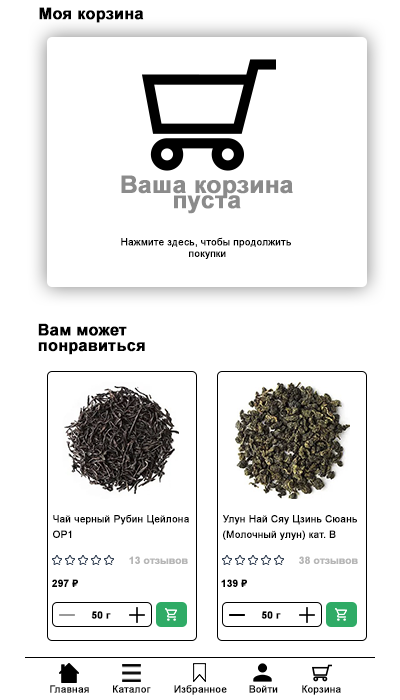
<style>
.page{position:relative;width:400px;height:700px;background:#ffffff}
.page>*{position:absolute;margin:0}
.t1{font:16px "Arial-BoldMT";color:#000000;font-weight:bold}
.t2{font:24px/3.8px "Arial-BoldMT";color:#8b8b8b;font-weight:bold}
.t3{font:10px/3.8px "ArialMT";color:#000000;font-weight:bold}
.t4{font:16px/3.8px "Arial-BoldMT";color:#000000;font-weight:bold}
.t5{font:10px "Arial-BoldMT";color:#b6b6b6;font-weight:bold}
.t6{font:10px "Arial-BoldMT";color:#000000;font-weight:bold}
.t7{font:10px "ArialMT";color:#000000;font-weight:bold}
</style>
<div class="page">
<p class="t1" style="left:39px;top:7px;width:105px;height:16px">Моя корзина</p>
<p class="t2" style="left:121px;top:175px;width:172px;height:39px;text-align:center">Ваша корзина<br><br><br><br>пуста</p>
<p class="t3" style="left:121px;top:237px;width:170px;height:22px;text-align:center">Нажмите здесь, чтобы продолжить <br><br><br>покупки</p>
<p class="t4" style="left:38px;top:323px;width:107px;height:32px">Вам может<br><br><br><br>понравиться</p>
<p class="t3" style="left:53px;top:514px;width:136px;height:24px">Чай черный Рубин Цейлона <br><br><br><br>OP1</p>
<p class="t3" style="left:223px;top:515px;width:134px;height:25px">Улун Най Сяу Цзинь Сюань<br><br><br><br>(Молочный улун) кат. B</p>
<p class="t5" style="left:129px;top:556px;width:59px;height:8px">13 отзывов</p>
<p class="t5" style="left:299px;top:556px;width:59px;height:8px">38 отзывов</p>
<p class="t6" style="left:52px;top:579px;width:26px;height:8px">297 ₽</p>
<p class="t6" style="left:221px;top:579px;width:26px;height:8px">139 ₽</p>
<p class="t6" style="left:91px;top:611px;width:20px;height:8px">50 г</p>
<p class="t6" style="left:261px;top:611px;width:20px;height:8px">50 г</p>
<p class="t7" style="left:50px;top:685px;width:39px;height:8px">Главная</p>
<p class="t7" style="left:113px;top:685px;width:38px;height:8px">Каталог</p>
<p class="t7" style="left:174px;top:685px;width:53px;height:10px">Избранное</p>
<p class="t7" style="left:249px;top:685px;width:29px;height:8px">Войти</p>
<p class="t7" style="left:302px;top:685px;width:39px;height:10px">Корзина</p>
</div>
